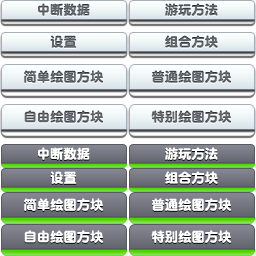
<style>
.page{position:relative;width:256px;height:256px}
.page>*{position:absolute;margin:0}
.t1{font:13.3px "DFPYuanW9";color:#61666d}
.t2{font:13.3px "DFPYuanW9";color:#ffffff}
</style>
<div class="page">
<p class="t1" style="left:38px;top:3px;width:52px;height:13px">中断数据</p>
<p class="t1" style="left:165px;top:3px;width:53px;height:13px">游玩方法</p>
<p class="t1" style="left:50px;top:35px;width:27px;height:13px">设置</p>
<p class="t1" style="left:165px;top:35px;width:53px;height:13px">组合方块</p>
<p class="t1" style="left:24px;top:70px;width:79px;height:13px">简单绘图方块</p>
<p class="t1" style="left:151px;top:70px;width:80px;height:13px">普通绘图方块</p>
<p class="t1" style="left:24px;top:110px;width:79px;height:13px">自由绘图方块</p>
<p class="t1" style="left:151px;top:110px;width:80px;height:13px">特别绘图方块</p>
<p class="t2" style="left:38px;top:147px;width:52px;height:13px">中断数据</p>
<p class="t2" style="left:165px;top:147px;width:53px;height:13px">游玩方法</p>
<p class="t2" style="left:50px;top:171px;width:27px;height:13px">设置</p>
<p class="t2" style="left:165px;top:171px;width:53px;height:13px">组合方块</p>
<p class="t2" style="left:24px;top:198px;width:79px;height:13px">简单绘图方块</p>
<p class="t2" style="left:151px;top:198px;width:80px;height:13px">普通绘图方块</p>
<p class="t2" style="left:24px;top:230px;width:79px;height:13px">自由绘图方块</p>
<p class="t2" style="left:151px;top:230px;width:80px;height:13px">特别绘图方块</p>
</div>
